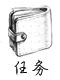
<style>
.page{position:relative;width:60px;height:80px;background:#ffffff}
.page>*{position:absolute;margin:0}
.t1{font:18px "STXingkaiSC-Light";letter-spacing:0.055em;color:#000000}
</style>
<div class="page">
<p class="t1" style="left:14px;top:59px;width:35px;height:17px">任务</p>
</div>
